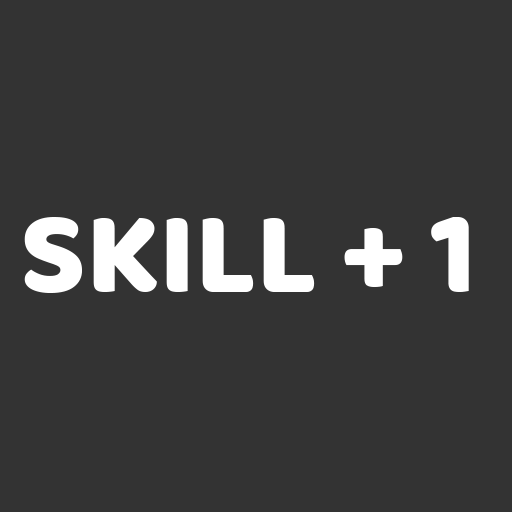
<style>
.page{position:relative;width:512px;height:512px;background:#333333}
.page>*{position:absolute;margin:0}
.t1{font:119.1px "BalooBhaina-Regular";color:#ffffff}
</style>
<div class="page">
<p class="t1" style="left:24px;top:217px;width:445px;height:76px">SKILL + 1</p>
</div>
